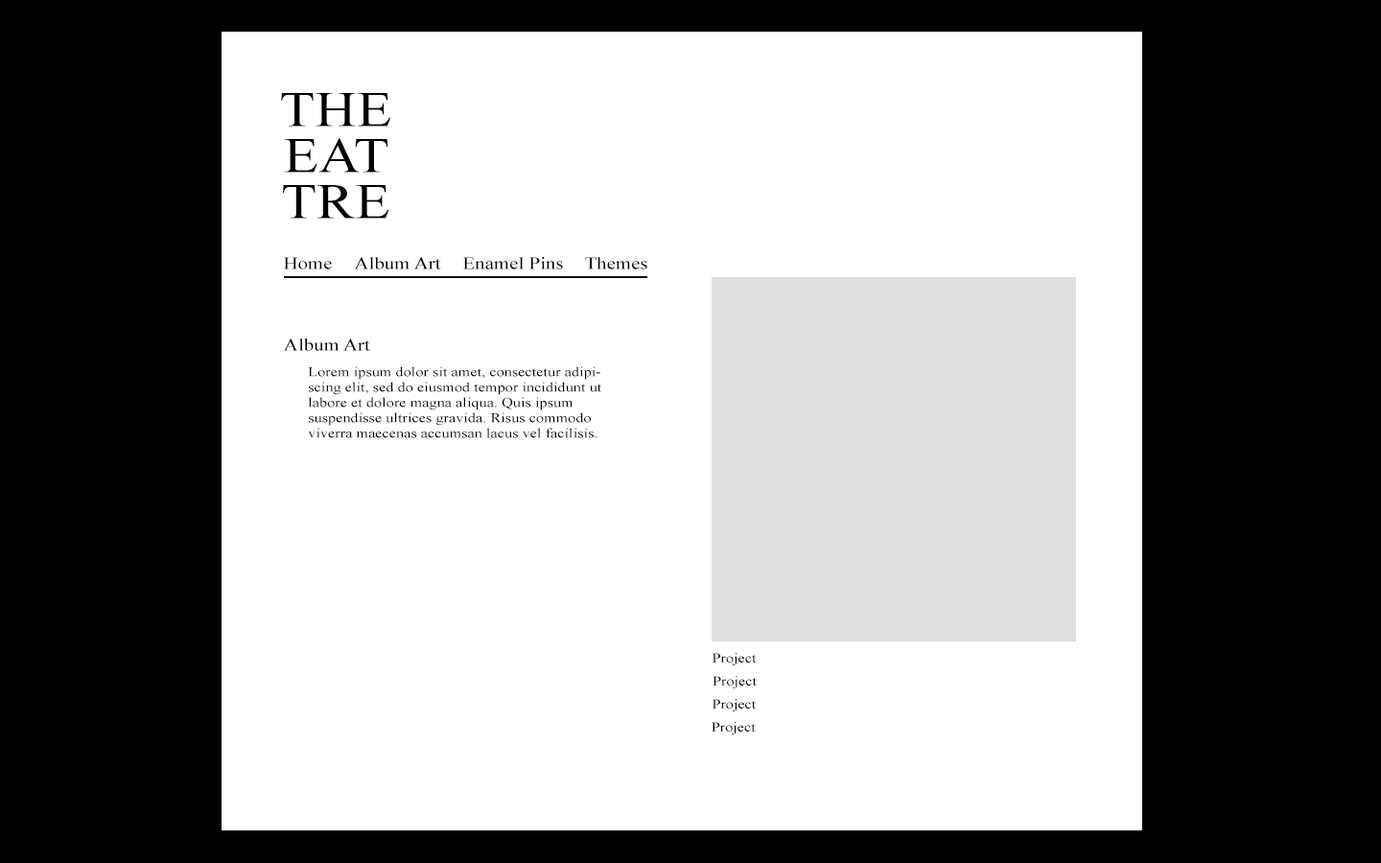
<style>
.page{position:relative;width:1381px;height:863px;background:#ffffff}
.page>*{position:absolute;margin:0}
.t1{font:49.9px/46px "TimesNewRomanPSMT";letter-spacing:0.005em;color:#000000;scale:1.15 1}
.t2{font:17.3px "TimesNewRomanPSMT";letter-spacing:0.005em;color:#000000;scale:1.15 1}
.t3{font:13.4px/15.3px "TimesNewRomanPSMT";letter-spacing:0.005em;color:#000000;scale:1.15 1}
.t4{font:13.4px "TimesNewRomanPSMT";letter-spacing:0.005em;color:#000000;scale:1.15 1}
</style>
<div class="page">
<p class="t1" style="left:281px;top:93px;width:110px;height:126px;text-align:center">THE<br>EAT<br>TRE</p>
<p class="t2" style="left:283px;top:257px;width:49px;height:13px">Home</p>
<p class="t2" style="left:354px;top:257px;width:87px;height:13px">Album Art</p>
<p class="t2" style="left:462px;top:257px;width:101px;height:13px">Enamel Pins</p>
<p class="t2" style="left:585px;top:257px;width:62px;height:13px">Themes</p>
<p class="t2" style="left:283px;top:339px;width:87px;height:12px">Album Art</p>
<p class="t3" style="left:308px;top:366px;width:294px;height:72px">Lorem ipsum dolor sit amet, consectetur adipiscing elit, sed do eiusmod tempor incididunt ut labore et dolore magna aliqua. Quis ipsum suspendisse ultrices gravida. Risus commodo viverra maecenas accumsan lacus vel facilisis.</p>
<p class="t4" style="left:712px;top:653px;width:45px;height:13px">Project</p>
<p class="t4" style="left:713px;top:676px;width:44px;height:13px">Project</p>
<p class="t4" style="left:712px;top:699px;width:45px;height:13px">Project</p>
<p class="t4" style="left:712px;top:722px;width:44px;height:13px">Project</p>
</div>
